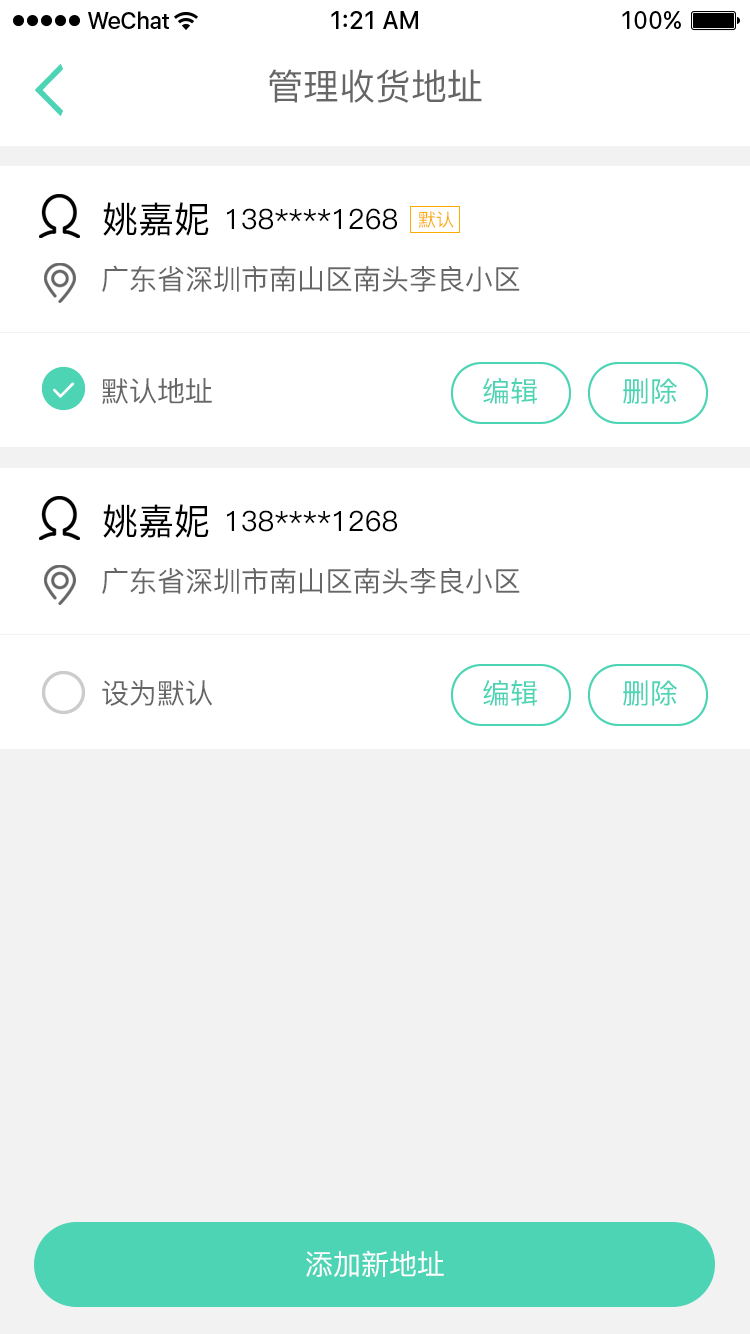
<style>
.page{position:relative;width:750px;height:1334px;background:#ffffff}
.page>*{position:absolute;margin:0}
.t1{font:36px "PingFang-SC-Medium";color:#666666}
.t2{font:36px "PingFang-SC-Medium";color:#000000}
.t3{font:28px "PingFang-SC-Medium";color:#000000}
.t4{font:18px "PingFang-SC-Medium";color:#fcac00}
.t5{font:28px "PingFang-SC-Medium";color:#666666}
.t6{font:28px "PingFang-SC-Medium";color:#4cd4b4}
.t7{font:28px "PingFang-SC-Medium";color:#ffffff}
</style>
<div class="page">
<p class="t1" style="left:269px;top:69px;width:213px;height:34px">管理收货地址</p>
<p class="t2" style="left:103px;top:202px;width:106px;height:34px">姚嘉妮</p>
<p class="t3" style="left:227px;top:208px;width:170px;height:22px">138****1268</p>
<p class="t4" style="left:419px;top:211px;width:35px;height:17px">默认</p>
<p class="t5" style="left:102px;top:265px;width:418px;height:27px">广东省深圳市南山区南头李良小区</p>
<p class="t5" style="left:102px;top:378px;width:110px;height:26px">默认地址</p>
<p class="t6" style="left:483px;top:378px;width:194px;height:26px">编辑         删除</p>
<p class="t2" style="left:103px;top:504px;width:106px;height:34px">姚嘉妮</p>
<p class="t3" style="left:227px;top:510px;width:170px;height:22px">138****1268</p>
<p class="t5" style="left:102px;top:567px;width:418px;height:27px">广东省深圳市南山区南头李良小区</p>
<p class="t5" style="left:102px;top:680px;width:110px;height:26px">设为默认</p>
<p class="t6" style="left:483px;top:680px;width:194px;height:26px">编辑         删除</p>
<p class="t7" style="left:306px;top:1250px;width:138px;height:27px">添加新地址</p>
</div>
